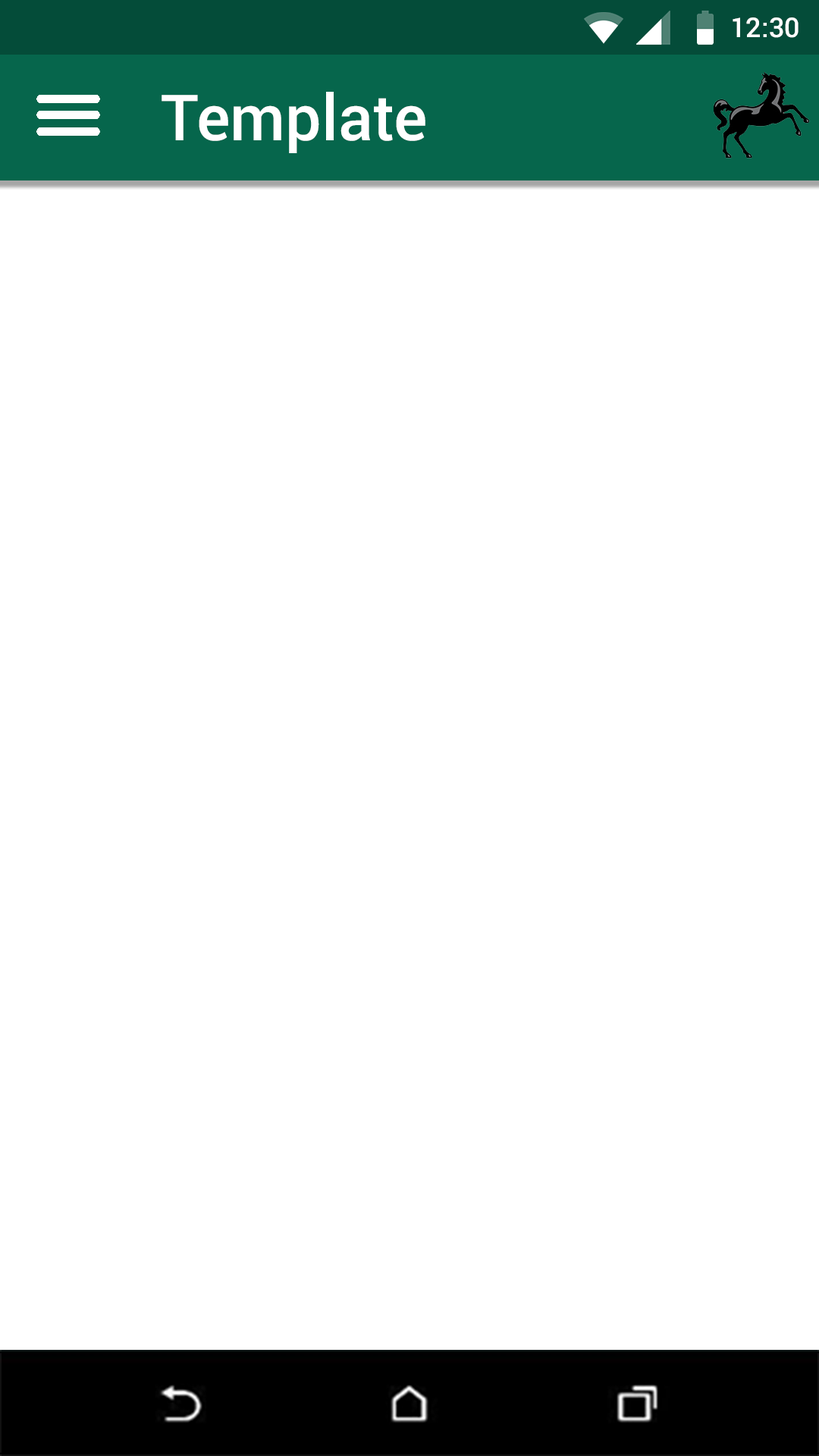
<style>
.page{position:relative;width:819px;height:1456px;background:#ffffff}
.page>*{position:absolute;margin:0}
.t1{font:27.3px "Roboto-Medium";color:#ffffff}
.t2{font:63.7px "Roboto-Medium";color:#ffffff}
</style>
<div class="page">
<p class="t1" style="left:733px;top:17px;width:66px;height:21px">12:30</p>
<p class="t2" style="left:162px;top:92px;width:263px;height:61px">Template</p>
</div>
